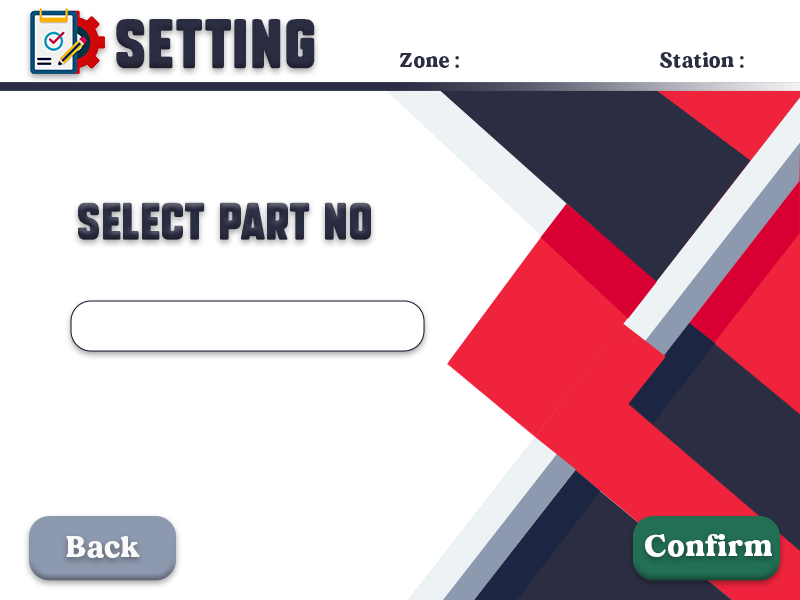
<style>
.page{position:relative;width:800px;height:600px;background:#ffffff}
.page>*{position:absolute;margin:0}
.t1{font:48px "SubtleCurves";letter-spacing:0.025em;color:#2b2d42}
.t2{font:20px "MADEDillan";letter-spacing:0.025em;color:#2b2d42}
.t3{font:36px "SubtleCurves";letter-spacing:0.025em;color:#2b2d42}
.t4{font:30px "MADEDillan";letter-spacing:0.025em;color:#ffffff}
.t5{font:30px "MADEDillan";letter-spacing:0.025em;color:#f9f9f9}
</style>
<div class="page">
<p class="t1" style="left:116px;top:19px;width:199px;height:50px">Setting</p>
<p class="t2" style="left:400px;top:53px;width:59px;height:15px">Zone :</p>
<p class="t2" style="left:660px;top:52px;width:84px;height:16px">Station :</p>
<p class="t3" style="left:78px;top:202px;width:293px;height:38px">select part no</p>
<p class="t4" style="left:645px;top:534px;width:127px;height:23px">Confirm</p>
<p class="t5" style="left:66px;top:536px;width:74px;height:22px">Back</p>
</div>
